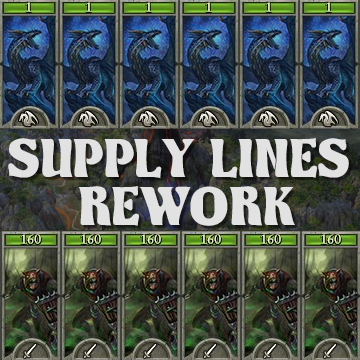
<style>
.page{position:relative;width:360px;height:360px}
.page>*{position:absolute;margin:0}
.t1{font:60px/48px "Kingthings-Organica";letter-spacing:0.01em;color:#e2e2e2;text-transform:uppercase}
</style>
<div class="page">
<p class="t1" style="left:8px;top:138px;width:341px;height:88px;text-align:center">Supply lines<br> rework</p>
</div>
